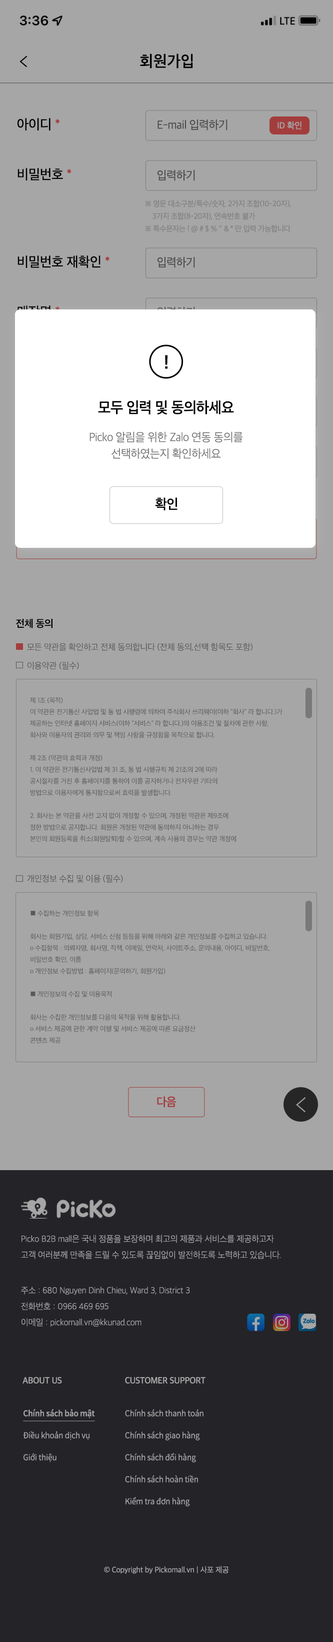
<style>
.page{position:relative;width:333px;height:1642px;background:#a6a6a6}
.page>*{position:absolute;margin:0}
.t1{font:16px "AppleSDGothicNeo-SemiBold";letter-spacing:0.017em;color:#000000}
.t2{font:14px "AppleSDGothicNeo-Medium";letter-spacing:-0.01em;color:#000000;scale:0.97 1}
.t3{font:14px "AppleSDGothicNeo-Medium";letter-spacing:-0.01em;color:#fa5e5e;scale:0.97 1}
.t4{font:12px "AppleSDGothicNeo-Regular";letter-spacing:-0.022em;color:#4a4a4a;scale:0.96 1}
.t5{font:9px "AppleSDGothicNeo-Medium";letter-spacing:-0.01em;color:#a6a6a6}
.t6{font:8px/12.5px "AppleSDGothicNeo-Regular";letter-spacing:-0.022em;color:#808080;scale:0.96 1}
.t7{font:18.6px "AppleSDGothicNeo-Bold";letter-spacing:-0.01em;color:#000000}
.t8{font:15.5px "AppleSDGothicNeo-SemiBold";letter-spacing:-0.022em;color:#000000;scale:0.96 1}
.t9{font:12px/16.5px "AppleSDGothicNeo-Light";letter-spacing:-0.022em;color:#727272;scale:0.96 1}
.t10{font:14.1px "AppleSDGothicNeo-SemiBold";letter-spacing:-0.022em;color:#000000;scale:0.96 1}
.t11{font:10.3px "AppleSDGothicNeo-Bold";letter-spacing:-0.02em;color:#000000}
.t12{font:8.9px "AppleSDGothicNeo-Regular";letter-spacing:-0.02em;color:#595959}
.t13{font:6.9px/11.5px "AppleSDGothicNeo-Regular";letter-spacing:-0.02em;color:#595959}
.t14{font:8.8px "AppleSDGothicNeo-Regular";letter-spacing:-0.02em;color:#595959}
.t15{font:12px "AppleSDGothicNeo-SemiBold";letter-spacing:-0.022em;color:#a33d3d;scale:0.97 1}
.t16{font:9px/16px "AppleSDGothicNeo-UltraLight";letter-spacing:-0.01em;color:#a6a6a6;scale:0.97 1}
.t17{font:9px "AppleSDGothicNeo-SemiBold";letter-spacing:-0.01em;color:#a6a6a6;scale:0.97 1}
.t18{font:9px "AppleSDGothicNeo-SemiBold";letter-spacing:-0.01em;color:#a6a6a6;text-transform:uppercase;scale:0.97 1}
.t19{font:8px/22px "NotoSansCJKkr-DemiLight";letter-spacing:-0.01em;color:#a6a6a6;scale:0.97 1}
.t20{font:8px/22px "NotoSansCJKkr-Medium";letter-spacing:-0.01em;color:#a6a6a6;text-decoration:underline;scale:0.97 1}
.t21{font:8px "AppleSDGothicNeo-Regular";letter-spacing:-0.01em;color:#a6a6a6;scale:0.97 1}
</style>
<div class="page">
<p class="t1" style="left:140px;top:53px;width:53px;height:15px">회원가입</p>
<p class="t2" style="left:17px;top:118px;width:42px;height:12px">아이디 <span class="t3">*</span></p>
<p class="t4" style="left:157px;top:119px;width:70px;height:11px">E-mail 입력하기</p>
<p class="t5" style="left:277px;top:121px;width:24px;height:8px">ID 확인</p>
<p class="t2" style="left:17px;top:168px;width:54px;height:12px">비밀번호 <span class="t3">*</span></p>
<p class="t4" style="left:157px;top:170px;width:38px;height:11px">입력하기</p>
<p class="t6" style="left:145px;top:200px;width:146px;height:32px">※ 영문 대소구분/특수/숫자, 2가지 조합(10-20자),<br>    3가지 조합(8-20자), 연속번호 불가<br>※ 특수문자는 ! @ # $ % ^ &amp; * 만 입력 가능합니다</p>
<p class="t2" style="left:17px;top:255px;width:92px;height:13px">비밀번호 재확인 <span class="t3">*</span></p>
<p class="t4" style="left:157px;top:257px;width:38px;height:11px">입력하기</p>
<p class="t7" style="left:165px;top:355px;width:2px;height:14px">!</p>
<p class="t8" style="left:98px;top:400px;width:136px;height:15px">모두 입력 및 동의하세요</p>
<p class="t9" style="left:89px;top:431px;width:154px;height:28px;text-align:center">Picko 알림을 위한 Zalo 연동 동의를<br>선택하였는지 확인하세요</p>
<p class="t10" style="left:155px;top:497px;width:22px;height:13px">확인</p>
<p class="t11" style="left:16px;top:619px;width:36px;height:9px">전체 동의</p>
<p class="t12" style="left:27px;top:643px;width:225px;height:8px">모든 약관을 확인하고 전체 동의합니다 (전체 동의,선택 항목도 포함)</p>
<p class="t12" style="left:27px;top:661px;width:52px;height:9px">이용약관 (필수)</p>
<p class="t13" style="left:30px;top:697px;width:252px;height:145px">제 1조 (목적) <br>이 약관은 전기통신 사업법 및 동 법 시행령에 의하여 주식회사 쓰리웨이(이하 "회사" 라 합니다.)가<br>제공하는 인터넷 홈페이지 서비스(이하 "서비스" 라 합니다.)의 이용조건 및 절차에 관한 사항,<br>회사와 이용자의 권리와 의무 및 책임 사항을 규정함을 목적으로 합니다.<br> <br>제 2조 (약관의 효력과 개정) <br>1. 이 약관은 전기통신사업법 제 31 조, 동 법 시행규칙 제 21조의 2에 따라<br>공시절차를 거친 후 홈페이지를 통하여 이를 공지하거나 전자우편 기타의<br>방법으로 이용자에게 통지함으로써 효력을 발생합니다.<br> <br>2. 회사는 본 약관을 사전 고지 없이 개정할 수 있으며, 개정된 약관은 제9조에<br>정한 방법으로 공지합니다. 회원은 개정된 약관에 동의하지 아니하는 경우<br>본인의 회원등록을 취소(회원탈퇴)할 수 있으며, 계속 사용의 경우는 약관 개정에</p>
<p class="t14" style="left:27px;top:875px;width:96px;height:8px">개인정보 수집 및 이용 (필수)</p>
<p class="t13" style="left:30px;top:910px;width:239px;height:134px">■ 수집하는 개인정보 항목<br><br>회사는 회원가입, 상담, 서비스 신청 등등을 위해 아래와 같은 개인정보를 수집하고 있습니다.<br>ο 수집항목 : 의뢰자명, 회사명, 직책, 이메일, 연락처, 사이트주소, 문의내용, 아이디, 비밀번호, <br>비밀번호 확인, 이름<br>ο 개인정보 수집방법 : 홈페이지(문의하기, 회원가입) <br><br>■ 개인정보의 수집 및 이용목적<br><br>회사는 수집한 개인정보를 다음의 목적을 위해 활용합니다.<br>ο 서비스 제공에 관한 계약 이행 및 서비스 제공에 따른 요금정산<br>콘텐츠 제공</p>
<p class="t15" style="left:157px;top:1096px;width:19px;height:11px">다음</p>
<p class="t16" style="left:21px;top:1235px;width:260px;height:24px">Picko B2B mall은 국내 정품을 보장하며 최고의 제품과 서비스를 제공하고자<br>고객 여러분께 만족을 드릴 수 있도록 끊임없이 발전하도록 노력하고 있습니다.</p>
<p class="t16" style="left:21px;top:1287px;width:169px;height:40px">주소 : 680 Nguyen Dinh Chieu, Ward 3, District 3<br>전화번호 : 0966 469 695<br>이메일 : pickomall.vn@kkunad.com</p>
<p class="t17" style="left:22px;top:1377px;width:40px;height:7px">ABOUT US</p>
<p class="t18" style="left:125px;top:1377px;width:80px;height:7px">Customer Support</p>
<p class="t19" style="left:23px;top:1409px;width:72px;height:53px"><span class="t20">Chính sách bảo mật<br></span>Điều khoản dịch vụ<br>Giới thiệu</p>
<p class="t19" style="left:125px;top:1409px;width:78px;height:98px">Chính sách thanh toán<br>Chính sách giao hàng<br>Chính sách đổi hàng<br>Chính sách hoàn tiền<br>Kiểm tra đơn hàng</p>
<p class="t21" style="left:104px;top:1566px;width:125px;height:8px">© Copyright by Pickomall.vn | 사포 제공</p>
</div>
